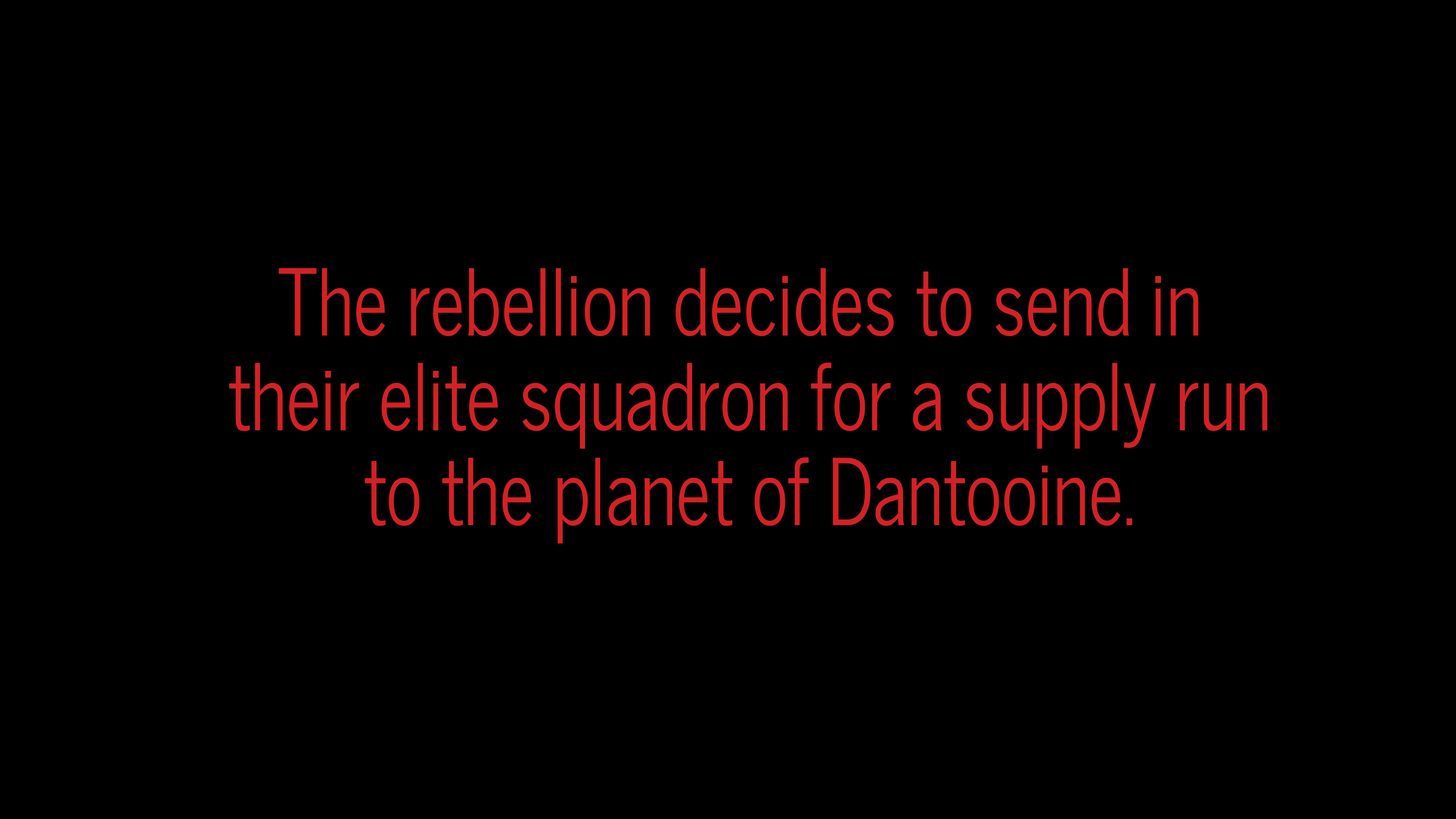
<style>
.page{position:relative;width:1456px;height:819px;background:#000000}
.page>*{position:absolute;margin:0}
.t1{font:91px/94.8px "NewsCycle";color:#d32124;scale:0.83 1}
</style>
<div class="page">
<p class="t1" style="left:229px;top:268px;width:1039px;height:276px;text-align:center">The rebellion decides to send in <br>their elite squadron for a supply run<br> to the planet of Dantooine.</p>
</div>
